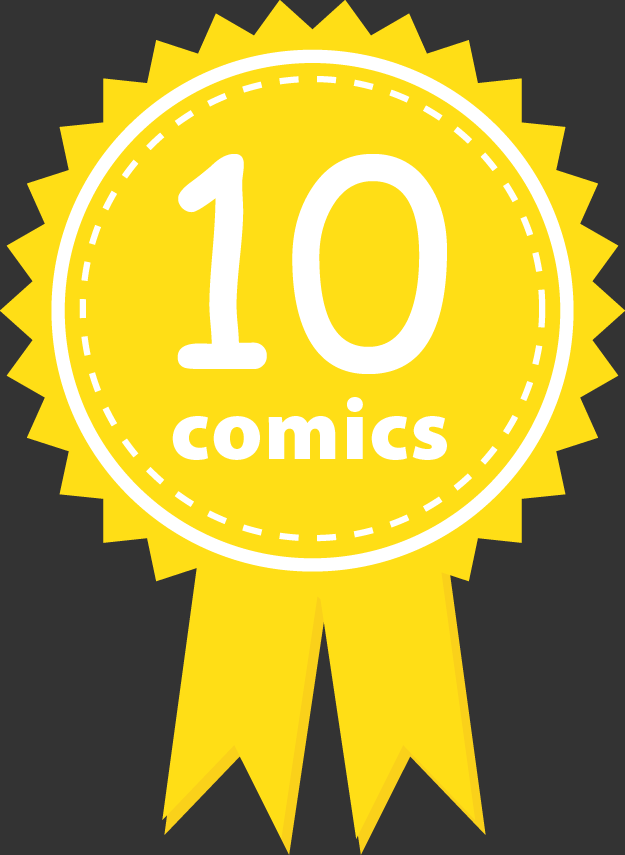
<style>
.page{position:relative;width:625px;height:855px;background:#ffde16}
.page>*{position:absolute;margin:0}
.t1{font:283.3px "ComicSansMS";color:#ffffff}
.t2{font:87.5px "MyriadPro-Black";letter-spacing:0.02em;color:#ffffff}
</style>
<div class="page">
<p class="t1" style="left:177px;top:154px;width:270px;height:220px">10</p>
<p class="t2" style="left:172px;top:397px;width:275px;height:63px">comics</p>
</div>
